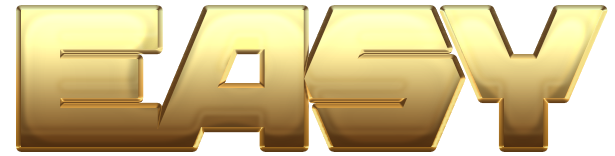
<style>
.page{position:relative;width:615px;height:156px;background:#ffffff}
.page>*{position:absolute;margin:0}
.t1{font:200px "Diagon"}
</style>
<div class="page">
<p class="t1" style="left:21px;top:10px;width:582px;height:137px">EASY</p>
</div>
